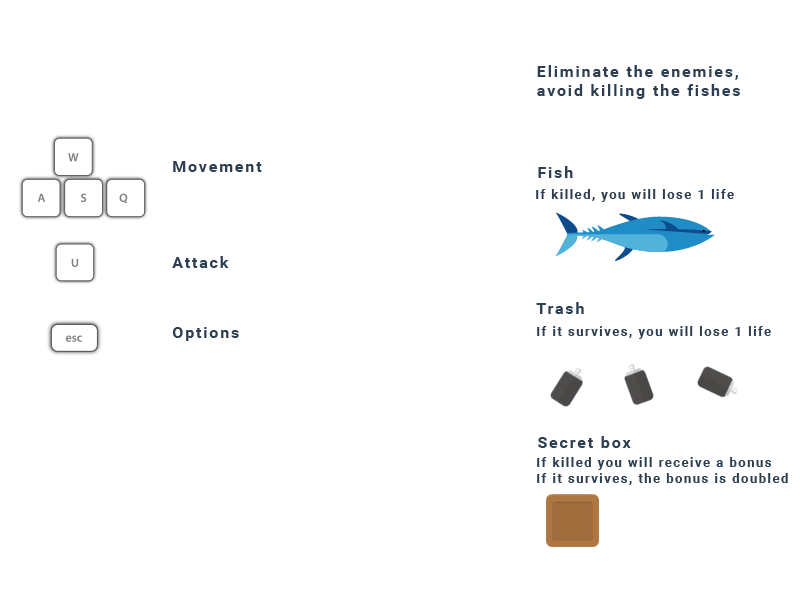
<style>
.page{position:relative;width:800px;height:600px;background:#ffffff}
.page>*{position:absolute;margin:0}
.t1{font:16px "Roboto-Bold";letter-spacing:0.115em;color:#2c3e50}
.t2{font:13px "Roboto-Bold";letter-spacing:0.115em;color:#2c3e50}
</style>
<div class="page">
<p class="t1" style="left:537px;top:65px;width:203px;height:34px">Eliminate the enemies, <br>avoid killing the fishes</p>
<p class="t1" style="left:173px;top:161px;width:89px;height:11px">Movement</p>
<p class="t1" style="left:538px;top:166px;width:35px;height:12px">Fish</p>
<p class="t2" style="left:536px;top:189px;width:198px;height:13px">If killed, you will lose 1 life</p>
<p class="t1" style="left:172px;top:256px;width:57px;height:12px">Attack</p>
<p class="t1" style="left:536px;top:302px;width:48px;height:12px">Trash</p>
<p class="t1" style="left:172px;top:327px;width:67px;height:14px">Options</p>
<p class="t2" style="left:537px;top:326px;width:234px;height:13px">If it survives, you will lose 1 life</p>
<p class="t1" style="left:538px;top:436px;width:93px;height:12px">Secret box</p>
<p class="t2" style="left:537px;top:457px;width:251px;height:28px">If killed you will receive a bonus<br>If it survives, the bonus is doubled</p>
</div>
